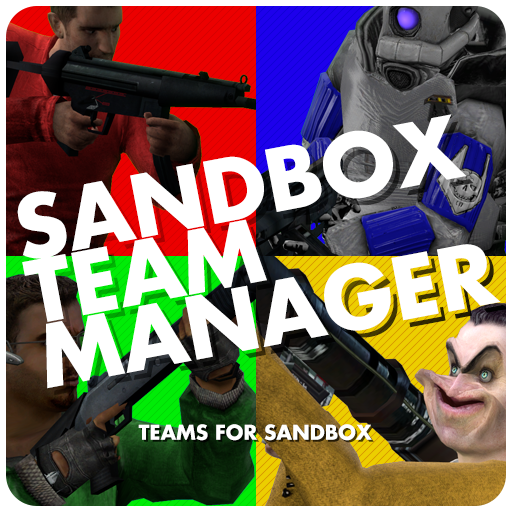
<style>
.page{position:relative;width:512px;height:512px;background:#ffffff}
.page>*{position:absolute;margin:0}
.t1{font:84px/65px "Futura-Bold";color:#ffffff}
.t2{font:84px/65px "Futura-Bold"}
.t3{font:20px "Futura-Bold";color:#ffffff}
</style>
<div class="page">
<p class="t1" style="left:17px;top:114px;width:484px;height:275px;rotate:-11deg">SANDBOX<br>TEAM<br>MANAGER</p>
<p class="t2" style="left:24px;top:121px;width:484px;height:275px;rotate:-11deg">SANDBOX<br>TEAM<br>MANAGER</p>
<p class="t3" style="left:138px;top:424px;width:234px;height:17px">TEAMS FOR SANDBOX</p>
</div>
